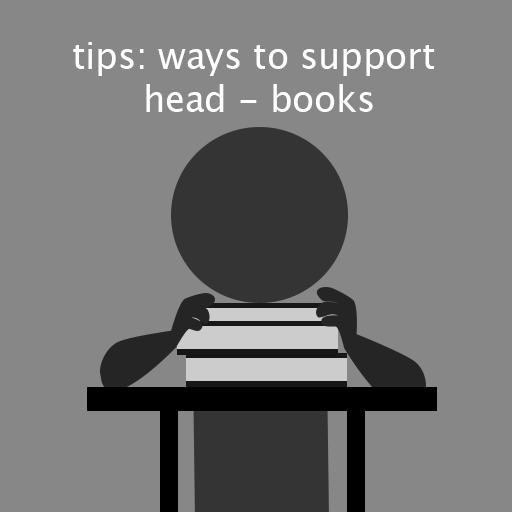
<style>
.page{position:relative;width:512px;height:512px;background:#878787}
.page>*{position:absolute;margin:0}
.t1{font:36px "LucidaGrande";letter-spacing:-0.005em;color:#ffffff}
</style>
<div class="page">
<p class="t1" style="left:73px;top:42px;width:362px;height:70px;text-align:center">tips: ways to support <br>head - books</p>
</div>
